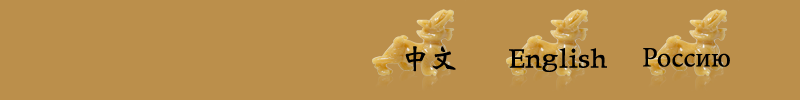
<style>
.page{position:relative;width:800px;height:100px;background:#bb8f4b}
.page>*{position:absolute;margin:0}
.t1{font:28px "DFWeiBei-Md-HKP-BF";color:#000000}
.t2{font:28px "MinionPro-Regular";color:#000000}
</style>
<div class="page">
<p class="t1" style="left:405px;top:46px;width:51px;height:26px">中文</p>
<p class="t1" style="left:509px;top:48px;width:98px;height:24px">English</p>
<p class="t2" style="left:643px;top:48px;width:87px;height:19px">Россию</p>
</div>
